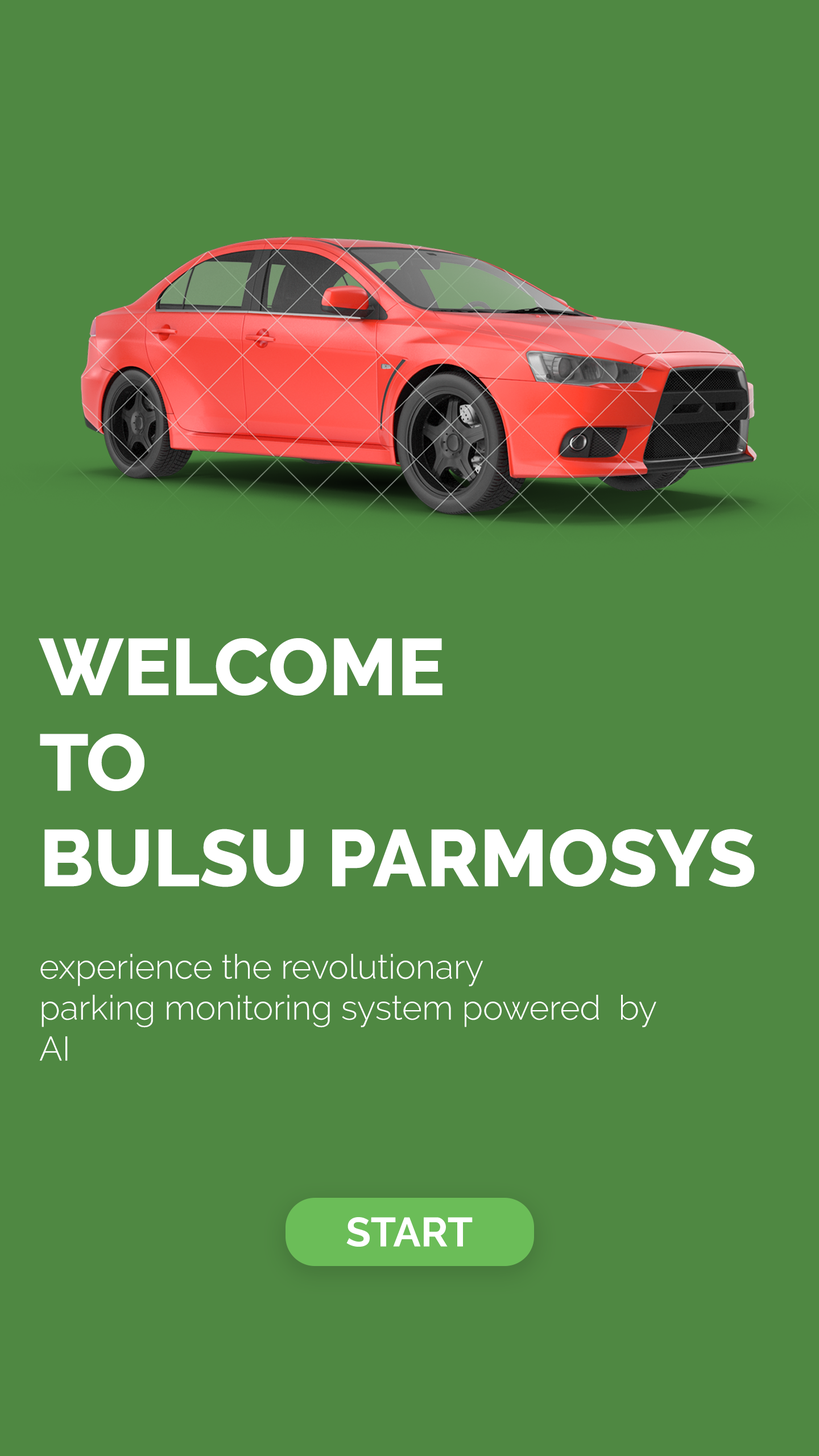
<style>
.page{position:relative;width:819px;height:1456px;background:#4f8842}
.page>*{position:absolute;margin:0}
.t1{font:79.6px "Raleway-ExtraBold";color:#ffffff}
.t2{font:34.1px "Raleway-Light";color:#ffffff}
.t3{font:40.9px "Raleway-Bold";color:#ffffff}
</style>
<div class="page">
<p class="t1" style="left:39px;top:638px;width:716px;height:249px">WELCOME<br>TO <br>BULSU PARMOSYS</p>
<p class="t2" style="left:39px;top:954px;width:617px;height:107px">experience the revolutionary<br>parking monitoring system powered  by<br>AI</p>
<p class="t3" style="left:346px;top:1217px;width:127px;height:30px">START</p>
</div>
